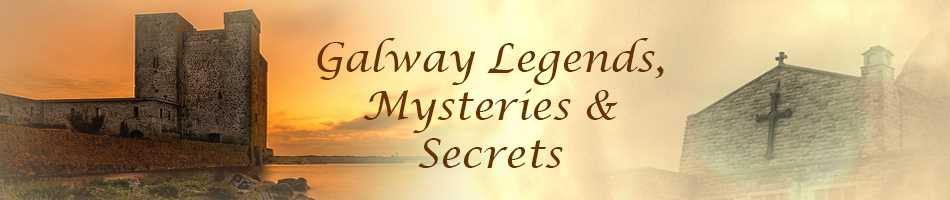
<style>
.page{position:relative;width:950px;height:200px}
.page>*{position:absolute;margin:0}
.t1{font:40px "LucidaCalligraphy-Italic";color:#663300}
</style>
<div class="page">
<p class="t1" style="left:317px;top:38px;width:347px;height:130px;text-align:center">Galway Legends, Mysteries &amp; Secrets</p>
</div>
